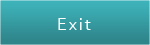
<style>
.page{position:relative;width:150px;height:45px}
.page>*{position:absolute;margin:0}
.t1{font:18px "Corbel";letter-spacing:0.1em;color:#ffffff}
</style>
<div class="page">
<p class="t1" style="left:58px;top:18px;width:33px;height:12px">Exit</p>
</div>
